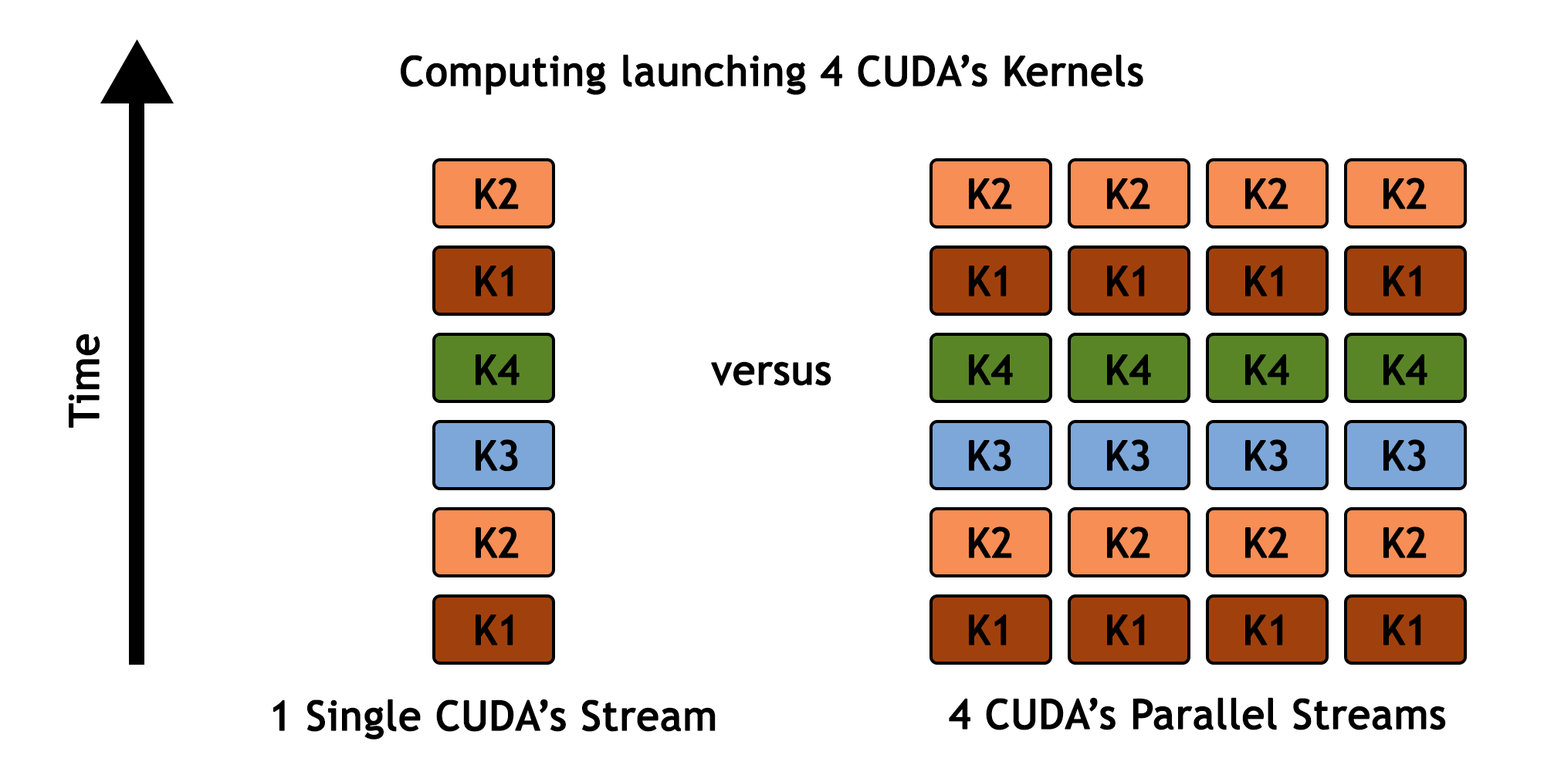
<style>
.page{position:relative;width:1544px;height:772px;background:#ffffff}
.page>*{position:absolute;margin:0}
.t1{font:41.2px "TrebuchetMS";color:#000000;font-weight:bold}
</style>
<div class="page">
<p class="t1" style="left:401px;top:54px;width:743px;height:41px">Computing launching 4 CUDA’s Kernels</p>
<p class="t1" style="left:476px;top:178px;width:43px;height:31px">K2</p>
<p class="t1" style="left:969px;top:178px;width:43px;height:31px">K2</p>
<p class="t1" style="left:1107px;top:178px;width:44px;height:31px">K2</p>
<p class="t1" style="left:1245px;top:178px;width:44px;height:31px">K2</p>
<p class="t1" style="left:1384px;top:178px;width:43px;height:31px">K2</p>
<p class="t1" style="left:476px;top:265px;width:37px;height:32px">K1</p>
<p class="t1" style="left:969px;top:265px;width:38px;height:32px">K1</p>
<p class="t1" style="left:1107px;top:265px;width:38px;height:32px">K1</p>
<p class="t1" style="left:1245px;top:265px;width:38px;height:32px">K1</p>
<p class="t1" style="left:1384px;top:265px;width:38px;height:32px">K1</p>
<p class="t1" style="left:68px;top:334px;width:32px;height:94px;rotate:-90deg">Time</p>
<p class="t1" style="left:476px;top:354px;width:44px;height:31px">K4</p>
<p class="t1" style="left:969px;top:354px;width:44px;height:31px">K4</p>
<p class="t1" style="left:1107px;top:354px;width:44px;height:31px">K4</p>
<p class="t1" style="left:1245px;top:354px;width:44px;height:31px">K4</p>
<p class="t1" style="left:1384px;top:354px;width:44px;height:31px">K4</p>
<p class="t1" style="left:711px;top:361px;width:121px;height:25px">versus</p>
<p class="t1" style="left:476px;top:439px;width:42px;height:33px">K3</p>
<p class="t1" style="left:969px;top:439px;width:43px;height:33px">K3</p>
<p class="t1" style="left:1107px;top:439px;width:43px;height:33px">K3</p>
<p class="t1" style="left:1245px;top:439px;width:43px;height:33px">K3</p>
<p class="t1" style="left:1384px;top:439px;width:42px;height:33px">K3</p>
<p class="t1" style="left:476px;top:527px;width:43px;height:31px">K2</p>
<p class="t1" style="left:969px;top:527px;width:43px;height:31px">K2</p>
<p class="t1" style="left:1107px;top:527px;width:44px;height:31px">K2</p>
<p class="t1" style="left:1245px;top:527px;width:44px;height:31px">K2</p>
<p class="t1" style="left:1384px;top:527px;width:43px;height:31px">K2</p>
<p class="t1" style="left:476px;top:614px;width:37px;height:32px">K1</p>
<p class="t1" style="left:969px;top:614px;width:38px;height:32px">K1</p>
<p class="t1" style="left:1107px;top:614px;width:38px;height:32px">K1</p>
<p class="t1" style="left:1245px;top:614px;width:38px;height:32px">K1</p>
<p class="t1" style="left:1384px;top:614px;width:38px;height:32px">K1</p>
<p class="t1" style="left:273px;top:699px;width:443px;height:41px">1 Single CUDA’s Stream</p>
<p class="t1" style="left:949px;top:697px;width:497px;height:33px">4 CUDA’s Parallel Streams</p>
</div>
